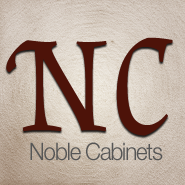
<style>
.page{position:relative;width:185px;height:185px}
.page>*{position:absolute;margin:0}
.t1{font:135px "AlmendraSC-Regular";letter-spacing:-0.009em;color:#4d1309;scale:0.93 1}
.t2{font:125px "AlmendraSC-Regular";letter-spacing:-0.009em;color:#4d1309;scale:0.93 1}
.t3{font:24px "HelveticaNeue-Light";letter-spacing:-0.049em;color:#565656;scale:0.93 1}
</style>
<div class="page">
<p class="t1" style="left:6px;top:40px;width:101px;height:92px">N</p>
<p class="t2" style="left:116px;top:37px;width:57px;height:99px">C</p>
<p class="t3" style="left:30px;top:142px;width:133px;height:19px">Noble Cabinets</p>
</div>
